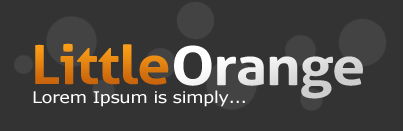
<style>
.page{position:relative;width:403px;height:131px;background:#333333}
.page>*{position:absolute;margin:0}
.t1{font:54px "Aller-Bold";letter-spacing:-0.025em;color:#dd7c11;scale:1.11 1}
.t2{font:54px "Aller-Bold";letter-spacing:-0.025em;scale:1.11 1}
.t3{font:16.2px "Verdana";letter-spacing:-0.025em;color:#ffffff;scale:1.11 1}
</style>
<div class="page">
<p class="t1" style="left:35px;top:43px;width:134px;height:42px">Little</p>
<p class="t2" style="left:174px;top:45px;width:189px;height:54px">Orange</p>
<p class="t3" style="left:33px;top:90px;width:212px;height:17px">Lorem Ipsum is simply...</p>
</div>
